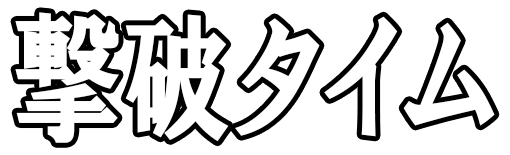
<style>
.page{position:relative;width:510px;height:155px;background:#ffffff}
.page>*{position:absolute;margin:0}
.t1{font:138.3px "HGPSoeiPresenceEB";color:#ffffff;scale:0.79 1}
</style>
<div class="page">
<p class="t1" style="left:15px;top:12px;width:480px;height:131px">撃破タイム</p>
</div>
